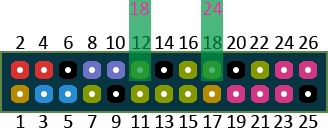
<style>
.page{position:relative;width:328px;height:130px;background:#ffffff}
.page>*{position:absolute;margin:0}
.t1{font:20px "Calibri";color:#d3369d}
.t2{font:20px "Calibri";color:#000000}
.t3{font:18px "Calibri";color:#000000}
.t4{font:20px "Calibri";color:#006b30}
.t5{font:18px "Calibri";color:#006b30}
</style>
<div class="page">
<p class="t1" style="left:130px;top:2px;width:19px;height:13px">18</p>
<p class="t1" style="left:203px;top:2px;width:20px;height:13px">24</p>
<p class="t2" style="left:16px;top:36px;width:9px;height:13px"><span class="t3"> </span>2</p>
<p class="t2" style="left:38px;top:36px;width:10px;height:13px"><span class="t3"> </span>4</p>
<p class="t2" style="left:64px;top:36px;width:9px;height:13px"><span class="t3"> </span>6</p>
<p class="t2" style="left:88px;top:36px;width:9px;height:13px"><span class="t3"> </span>8</p>
<p class="t2" style="left:106px;top:36px;width:19px;height:13px"><span class="t3"> </span>10</p>
<p class="t4" style="left:132px;top:36px;width:19px;height:13px"><span class="t5"> </span>12</p>
<p class="t2" style="left:155px;top:36px;width:19px;height:13px"><span class="t3"> </span>14</p>
<p class="t2" style="left:179px;top:36px;width:19px;height:13px"><span class="t3"> </span>16</p>
<p class="t4" style="left:203px;top:36px;width:19px;height:13px"><span class="t5"> </span>18</p>
<p class="t2" style="left:227px;top:36px;width:19px;height:13px"><span class="t3"> </span>20</p>
<p class="t2" style="left:250px;top:36px;width:19px;height:13px"><span class="t3"> </span>22</p>
<p class="t2" style="left:275px;top:36px;width:19px;height:13px"><span class="t3"> </span>24</p>
<p class="t2" style="left:299px;top:36px;width:19px;height:13px"><span class="t3"> </span>26</p>
<p class="t2" style="left:16px;top:115px;width:9px;height:13px"><span class="t3"> </span>1</p>
<p class="t2" style="left:39px;top:115px;width:9px;height:13px"><span class="t3"> </span>3</p>
<p class="t2" style="left:64px;top:115px;width:9px;height:13px"><span class="t3"> </span>5</p>
<p class="t2" style="left:88px;top:115px;width:9px;height:13px"><span class="t3"> </span>7</p>
<p class="t2" style="left:111px;top:115px;width:10px;height:13px"><span class="t3"> </span>9</p>
<p class="t2" style="left:131px;top:115px;width:19px;height:13px"><span class="t3"> </span>11</p>
<p class="t2" style="left:155px;top:115px;width:19px;height:13px"><span class="t3"> </span>13</p>
<p class="t2" style="left:179px;top:115px;width:19px;height:13px"><span class="t3"> </span>15</p>
<p class="t2" style="left:203px;top:115px;width:19px;height:13px"><span class="t3"> </span>17</p>
<p class="t2" style="left:227px;top:115px;width:19px;height:13px"><span class="t3"> </span>19</p>
<p class="t2" style="left:251px;top:115px;width:19px;height:13px"><span class="t3"> </span>21</p>
<p class="t2" style="left:274px;top:115px;width:19px;height:13px"><span class="t3"> </span>23</p>
<p class="t2" style="left:299px;top:115px;width:19px;height:13px"><span class="t3"> </span>25</p>
</div>
